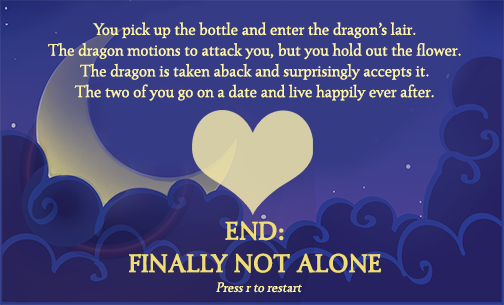
<style>
.page{position:relative;width:504px;height:305px;background:#363b86}
.page>*{position:absolute;margin:0}
.t1{font:17.3px "Seshat-Regular";color:#fff5a5}
.t2{font:16.2px "Seshat-Regular";color:#fff5a5}
.t3{font:26px/32.4px "Seshat-Regular";color:#f0de75;font-weight:bold}
.t4{font:16.2px "Quicksand-Regular";color:#f0de75}
.t5{font:14px "Seshat-Regular";color:#fff5a5;font-style:italic}
</style>
<div class="page">
<p class="t1" style="left:48px;top:22px;width:413px;height:79px;text-align:center"><span class="t2"><br></span>You pick up the bottle and enter the dragon’s lair.<br>The dragon motions to attack you, but you hold out the flower. <br>The dragon is taken aback and surprisingly accepts it. <br>The two of you go on a date and live happily ever after.</p>
<p class="t3" style="left:129px;top:221px;width:252px;height:52px"><span class="t4"><br></span>END:<br>FINALLY NOT ALONE</p>
<p class="t5" style="left:216px;top:282px;width:86px;height:11px">Press r to restart</p>
</div>
